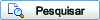
<style>
.page{position:relative;width:100px;height:20px;background:#ffffff}
.page>*{position:absolute;margin:0}
.t1{font:11.1px "ArialMT";color:#060808}
</style>
<div class="page">
<p class="t1" style="left:36px;top:6px;width:49px;height:11px">Pesquisar</p>
</div>
